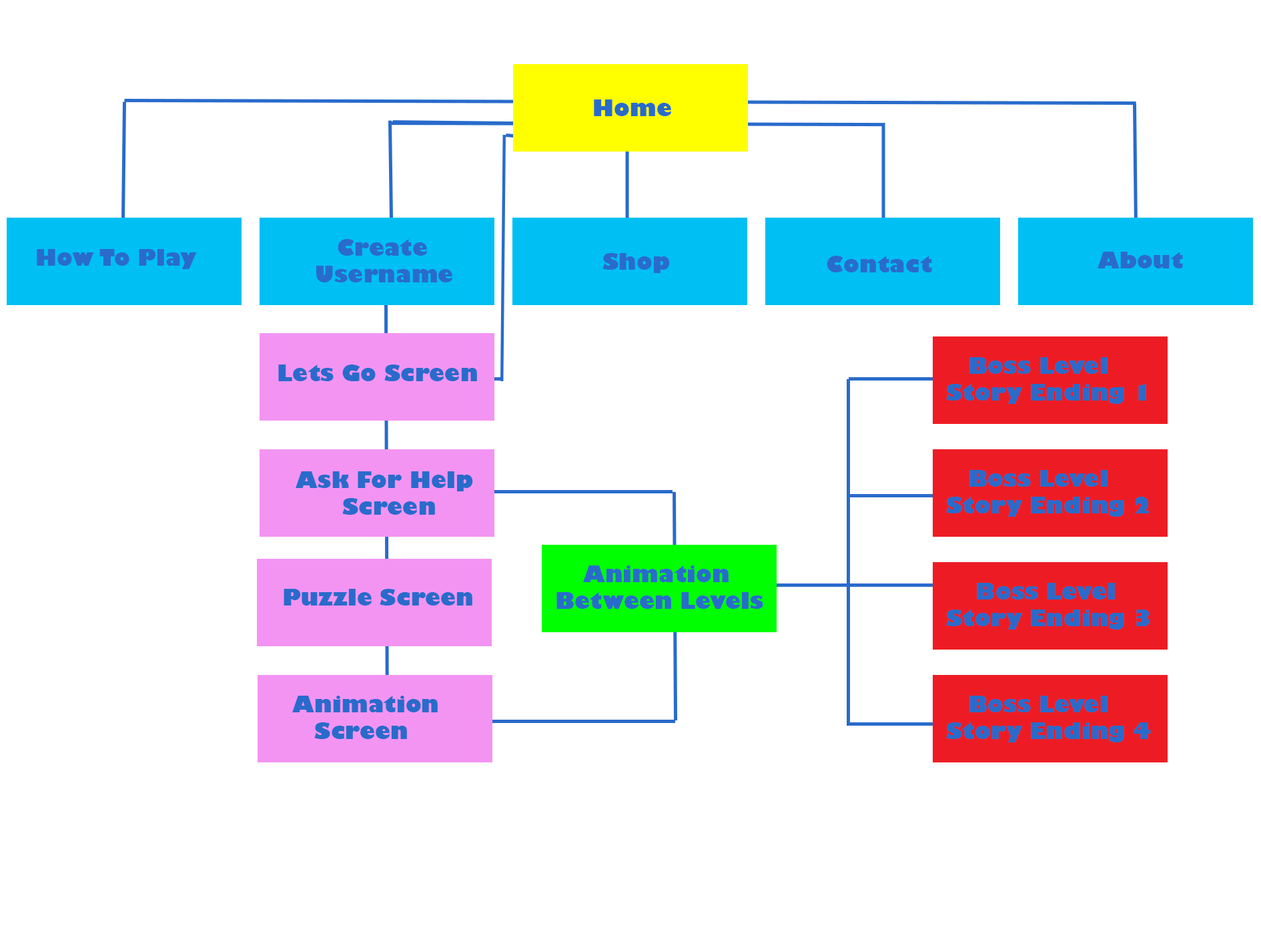
<style>
.page{position:relative;width:1261px;height:946px;background:#ffffff}
.page>*{position:absolute;margin:0}
.t1{font:22.2px "GillSans-UltraBold";color:#296bcb}
</style>
<div class="page">
<p class="t1" style="left:594px;top:99px;width:77px;height:17px">Home</p>
<p class="t1" style="left:316px;top:239px;width:136px;height:43px">Create <br>Username</p>
<p class="t1" style="left:37px;top:249px;width:160px;height:20px">How To Play</p>
<p class="t1" style="left:603px;top:253px;width:67px;height:20px">Shop</p>
<p class="t1" style="left:827px;top:256px;width:105px;height:16px">Contact</p>
<p class="t1" style="left:1098px;top:252px;width:85px;height:16px">About</p>
<p class="t1" style="left:278px;top:364px;width:199px;height:17px">Lets Go Screen</p>
<p class="t1" style="left:946px;top:357px;width:200px;height:47px">Boss Level <br>Story Ending 1</p>
<p class="t1" style="left:296px;top:471px;width:177px;height:43px">Ask For Help<br>       Screen</p>
<p class="t1" style="left:946px;top:470px;width:203px;height:46px">Boss Level <br>Story Ending 2</p>
<p class="t1" style="left:557px;top:565px;width:206px;height:44px">Animation<br>Between Levels</p>
<p class="t1" style="left:284px;top:589px;width:188px;height:16px">Puzzle Screen</p>
<p class="t1" style="left:946px;top:583px;width:204px;height:46px">Boss Level <br>Story Ending 3</p>
<p class="t1" style="left:292px;top:695px;width:146px;height:44px">Animation <br>   Screen</p>
<p class="t1" style="left:946px;top:695px;width:205px;height:47px">Boss Level <br>Story Ending 4</p>
</div>
